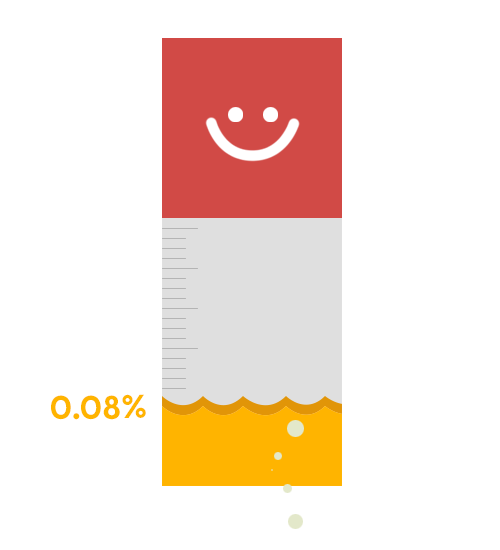
<style>
.page{position:relative;width:500px;height:550px;background:#ffffff}
.page>*{position:absolute;margin:0}
.t1{font:32.8px "Edmondsans-Bold";color:#ffb400}
</style>
<div class="page">
<p class="t1" style="left:51px;top:394px;width:95px;height:26px;rotate:-1deg">0.08%</p>
</div>
